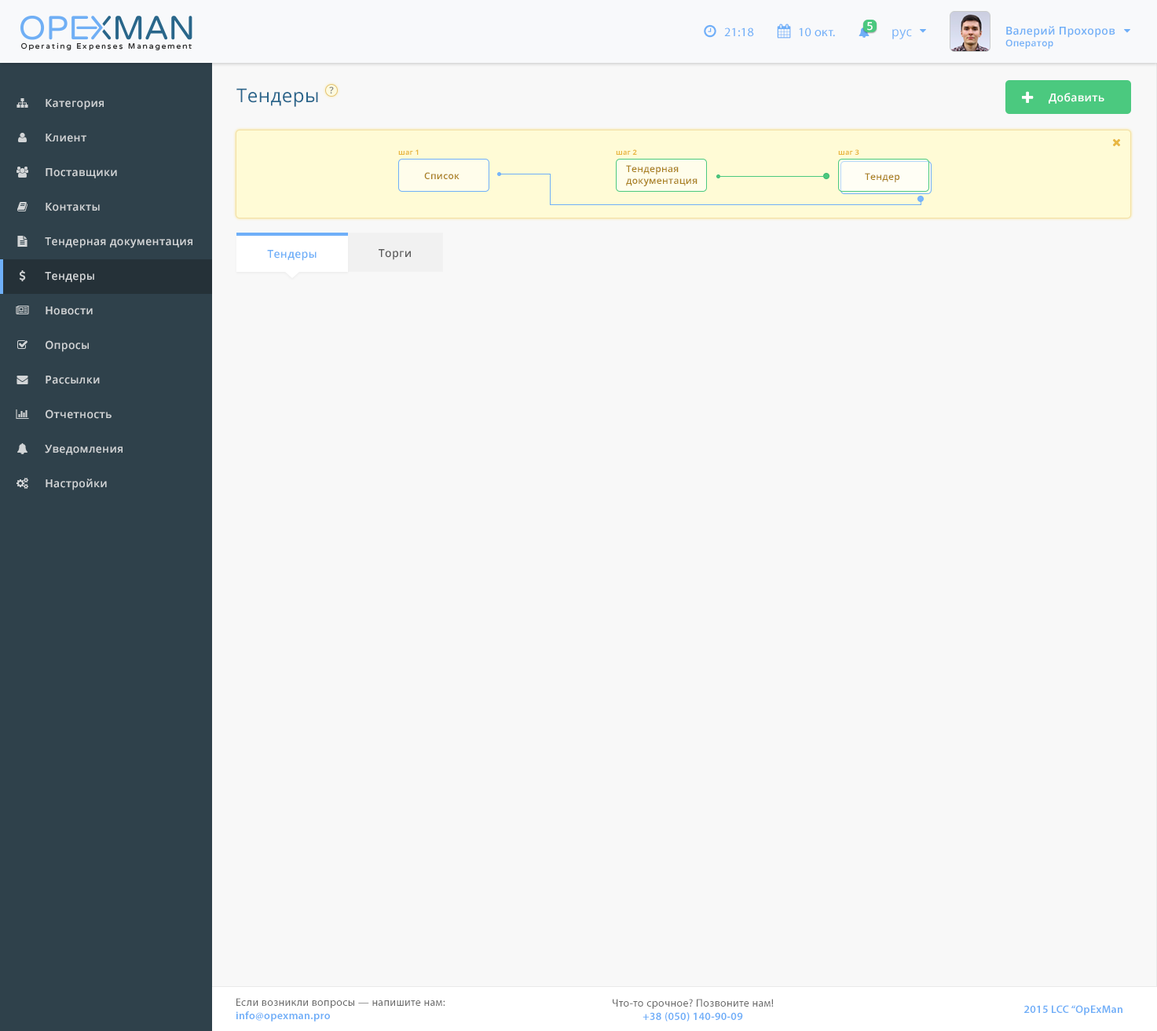
<style>
.page{position:relative;width:1157px;height:1031px;background:#f8f8f8}
.page>*{position:absolute;margin:0}
.t1{font:12.5px "MyriadPro-Regular";letter-spacing:0.025em;color:#6faff8}
.t2{font:11px "OpenSans-Semibold";letter-spacing:0.025em;color:#ffffff}
.t3{font:12.5px "OpenSans";letter-spacing:0.025em;color:#6eaff8}
.t4{font:11px "OpenSans-Semibold";letter-spacing:0.025em;color:#6eaef7}
.t5{font:9.4px "OpenSans-Semibold";letter-spacing:0.025em;color:#6eaef7}
.t6{font:18.8px "OpenSans";letter-spacing:0.025em;color:#29658b}
.t7{font:9.4px "OpenSans-Semibold";letter-spacing:0.025em;color:#898989}
.t8{font:11px "OpenSans-Semibold";letter-spacing:0.025em;color:#d2d5d7}
.t9{font:7px "OpenSans-Bold";letter-spacing:0.025em;color:#e8b742}
.t10{font:9.4px "OpenSans-Semibold";letter-spacing:0.025em;color:#aa801d}
.t11{font:11px "OpenSans-Semibold";letter-spacing:0.025em;color:#6eaff8}
.t12{font:11px "OpenSans-Semibold";letter-spacing:0.025em;color:#5a5a5a}
.t13{font:11px "MyriadPro-Regular";letter-spacing:0.025em;color:#696969}
.t14{font:11px "MyriadPro-Semibold";letter-spacing:0.025em;color:#6eaef8}
</style>
<div class="page">
<p class="t1" style="left:724px;top:27px;width:30px;height:10px">21:18</p>
<p class="t1" style="left:799px;top:27px;width:36px;height:10px">10 окт.</p>
<p class="t2" style="left:867px;top:22px;width:6px;height:9px">5</p>
<p class="t3" style="left:892px;top:29px;width:20px;height:10px">рус</p>
<p class="t4" style="left:1005px;top:26px;width:110px;height:23px">Валерий Прохоров<br><span class="t5">Оператор</span></p>
<p class="t6" style="left:236px;top:88px;width:82px;height:19px">Тендеры</p>
<p class="t7" style="left:329px;top:86px;width:5px;height:7px">?</p>
<p class="t8" style="left:46px;top:99px;width:58px;height:11px">Категория</p>
<p class="t2" style="left:1049px;top:93px;width:55px;height:11px">Добавить</p>
<p class="t8" style="left:46px;top:134px;width:40px;height:8px">Клиент</p>
<p class="t9" style="left:398px;top:149px;width:21px;height:6px">шаг 1</p>
<p class="t9" style="left:616px;top:149px;width:21px;height:6px">шаг 2</p>
<p class="t9" style="left:838px;top:149px;width:21px;height:6px">шаг 3</p>
<p class="t8" style="left:46px;top:168px;width:71px;height:10px">Поставщики</p>
<p class="t10" style="left:424px;top:172px;width:36px;height:7px">Список</p>
<p class="t10" style="left:626px;top:165px;width:72px;height:21px">Тендерная<br>документация</p>
<p class="t10" style="left:865px;top:173px;width:35px;height:9px">Тендер</p>
<p class="t8" style="left:46px;top:203px;width:54px;height:8px">Контакты</p>
<p class="t8" style="left:45px;top:237px;width:147px;height:11px">Тендерная документация</p>
<p class="t11" style="left:267px;top:250px;width:50px;height:11px">Тендеры</p>
<p class="t12" style="left:379px;top:249px;width:32px;height:11px">Торги</p>
<p class="t8" style="left:45px;top:272px;width:49px;height:11px">Тендеры</p>
<p class="t8" style="left:46px;top:306px;width:47px;height:9px">Новости</p>
<p class="t8" style="left:46px;top:340px;width:43px;height:12px">Опросы</p>
<p class="t8" style="left:46px;top:375px;width:54px;height:9px">Рассылки</p>
<p class="t8" style="left:46px;top:409px;width:66px;height:10px">Отчетность</p>
<p class="t8" style="left:45px;top:445px;width:78px;height:10px">Уведомления</p>
<p class="t8" style="left:46px;top:478px;width:61px;height:12px">Настройки</p>
<p class="t13" style="left:236px;top:998px;width:209px;height:23px">Если возникли вопросы — напишите нам:<br><span class="t14">info@opexman.pro</span></p>
<p class="t13" style="left:613px;top:998px;width:161px;height:23px;text-align:center">Что-то срочное? Позвоните нам!<br><span class="t14">+38 (050) 140-90-09</span></p>
<p class="t14" style="left:1024px;top:1005px;width:98px;height:10px">2015 LCC “OpExMan</p>
</div>
